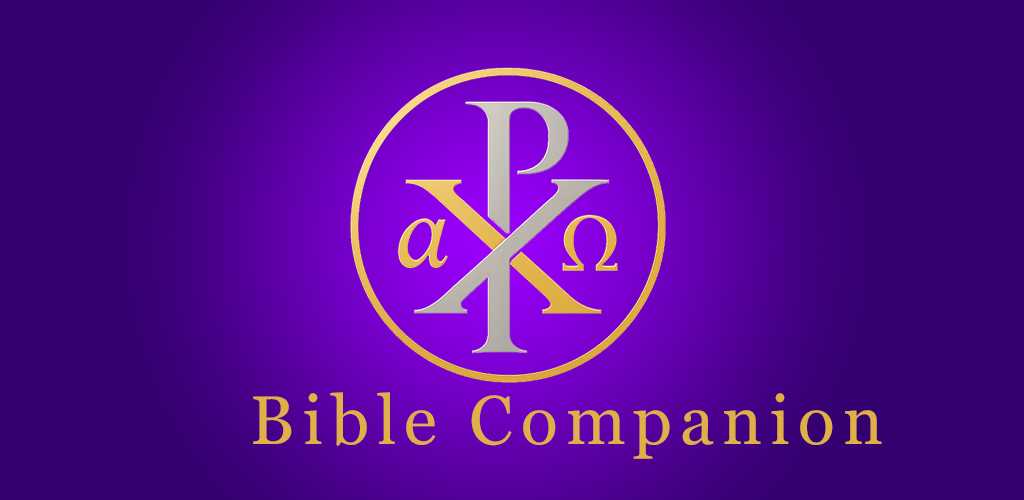
<style>
.page{position:relative;width:1024px;height:500px;background:#350070}
.page>*{position:absolute;margin:0}
.t1{font:68.4px "Georgia";letter-spacing:0.12em;color:#e0af45}
</style>
<div class="page">
<p class="t1" style="left:253px;top:392px;width:629px;height:67px">Bible Companion</p>
</div>
